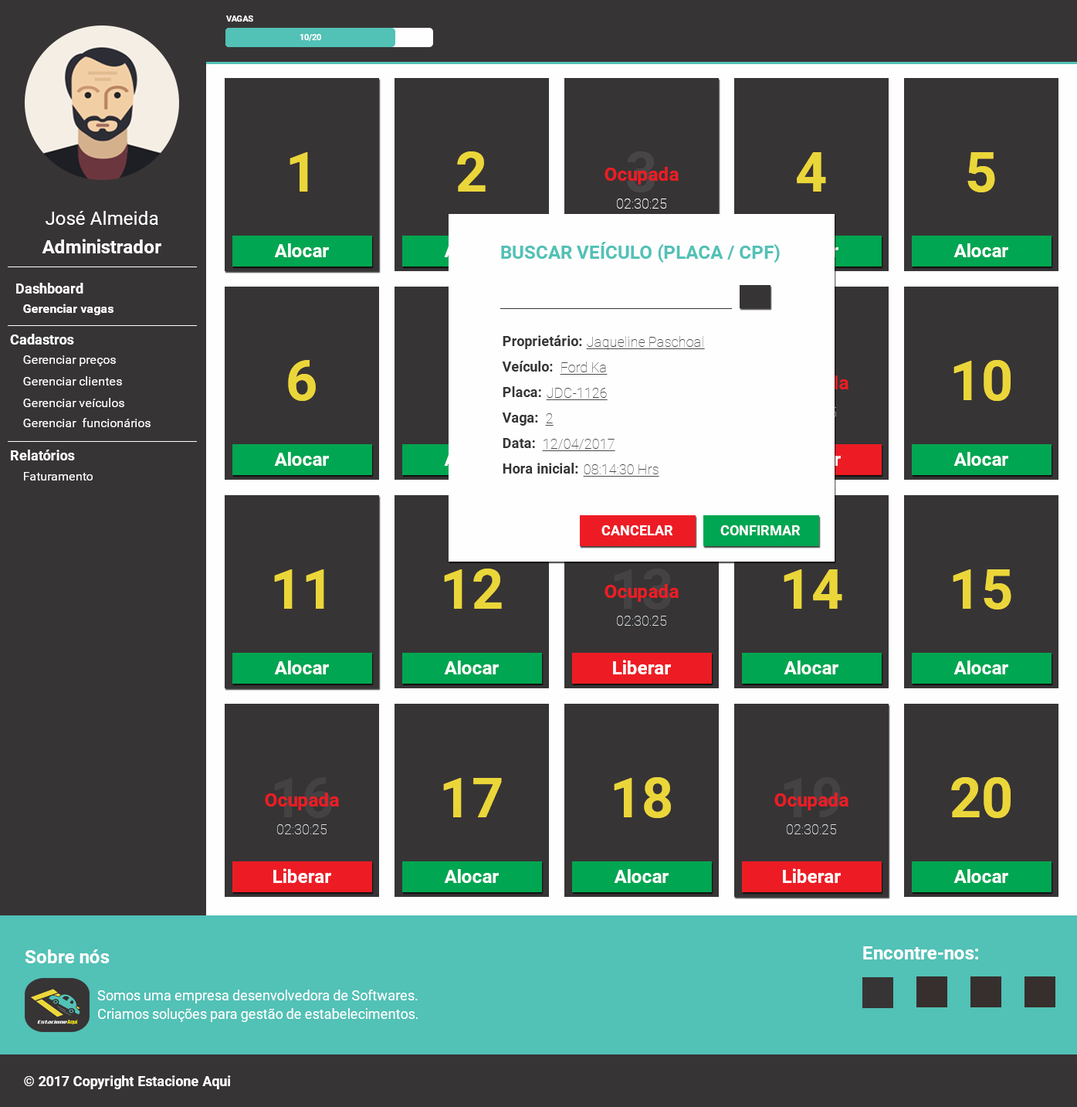
<style>
.page{position:relative;width:1077px;height:1107px;background:#373435}
.page>*{position:absolute;margin:0}
.t1{font:8.5px "Roboto-Bold";color:#fefefe;text-transform:uppercase}
.t2{font:8.5px "Roboto-Bold";color:#fefefe}
.t3{font:55.6px "Roboto-Bold";color:#ebd63a}
.t4{font:55.6px "Roboto-Bold";color:#484546}
.t5{font:18.5px "Roboto-Bold";color:#ed1c24}
.t6{font:13.9px "Roboto-Thin";color:#fefefe}
.t7{font:18.5px "Roboto-Regular";color:#fefefe}
.t8{font:18.5px "Roboto-Bold";color:#fefefe}
.t9{font:18.5px "Roboto-Bold";color:#52c1b6;text-transform:uppercase}
.t10{font:13.9px "Roboto-Bold";color:#fefefe}
.t11{font:12.4px "Roboto-Bold";color:#fefefe}
.t12{font:13.9px "Roboto-Bold";color:#373435}
.t13{font:13.9px "Roboto-Thin";color:#484b4d;text-decoration:underline}
.t14{font:12.4px "Roboto-Regular";color:#fefefe}
.t15{font:13.9px "Roboto-Bold";color:#fefefe;text-transform:uppercase}
.t16{font:55.6px "Roboto-Bold";color:#444243}
.t17{font:13.9px "Roboto-Thin";color:#d9e0e6}
.t18{font:13.9px/18.5px "Roboto-Regular";color:#fefefe}
</style>
<div class="page">
<p class="t1" style="left:226px;top:15px;width:27px;height:7px">Vagas</p>
<p class="t2" style="left:300px;top:34px;width:21px;height:7px">10/20</p>
<p class="t3" style="left:290px;top:152px;width:18px;height:40px">1</p>
<p class="t3" style="left:457px;top:151px;width:29px;height:41px">2</p>
<p class="t4" style="left:627px;top:151px;width:28px;height:41px">3</p>
<p class="t3" style="left:797px;top:152px;width:29px;height:40px">4</p>
<p class="t3" style="left:968px;top:152px;width:28px;height:40px">5</p>
<p class="t5" style="left:605px;top:167px;width:74px;height:18px">Ocupada</p>
<p class="t6" style="left:617px;top:198px;width:50px;height:11px">02:30:25</p>
<p class="t7" style="left:46px;top:211px;width:112px;height:14px">José Almeida</p>
<p class="t8" style="left:42px;top:239px;width:119px;height:14px">Administrador</p>
<p class="t8" style="left:274px;top:243px;width:55px;height:14px">Alocar</p>
<p class="t9" style="left:501px;top:242px;width:279px;height:21px">Buscar veículo (placa / cpf)</p>
<p class="t8" style="left:954px;top:243px;width:55px;height:14px">Alocar</p>
<p class="t10" style="left:16px;top:283px;width:67px;height:10px">Dashboard</p>
<p class="t11" style="left:23px;top:304px;width:91px;height:11px">Gerenciar vagas</p>
<p class="t10" style="left:10px;top:334px;width:64px;height:10px">Cadastros</p>
<p class="t12" style="left:503px;top:335px;width:79px;height:14px">Proprietário:</p>
<p class="t13" style="left:586px;top:336px;width:119px;height:14px">Jaqueline Paschoal</p>
<p class="t14" style="left:23px;top:355px;width:93px;height:11px">Gerenciar preços</p>
<p class="t3" style="left:288px;top:360px;width:28px;height:41px">6</p>
<p class="t12" style="left:502px;top:361px;width:51px;height:10px">Veículo:</p>
<p class="t13" style="left:560px;top:361px;width:48px;height:14px">Ford Ka</p>
<p class="t3" style="left:954px;top:360px;width:57px;height:41px">10</p>
<p class="t14" style="left:23px;top:376px;width:99px;height:9px">Gerenciar clientes</p>
<p class="t12" style="left:503px;top:386px;width:38px;height:11px">Placa:</p>
<p class="t13" style="left:546px;top:388px;width:62px;height:12px">JDC-1126</p>
<p class="t14" style="left:23px;top:398px;width:101px;height:9px">Gerenciar veículos</p>
<p class="t12" style="left:502px;top:412px;width:36px;height:14px">Vaga:</p>
<p class="t13" style="left:545px;top:413px;width:9px;height:13px">2</p>
<p class="t14" style="left:23px;top:418px;width:128px;height:9px">Gerenciar  funcionários</p>
<p class="t12" style="left:503px;top:438px;width:32px;height:10px">Data:</p>
<p class="t10" style="left:11px;top:450px;width:64px;height:10px">Relatórios</p>
<p class="t13" style="left:542px;top:439px;width:74px;height:12px">12/04/2017</p>
<p class="t8" style="left:274px;top:452px;width:55px;height:14px">Alocar</p>
<p class="t8" style="left:954px;top:452px;width:55px;height:14px">Alocar</p>
<p class="t14" style="left:24px;top:472px;width:69px;height:8px">Faturamento</p>
<p class="t12" style="left:503px;top:463px;width:75px;height:10px">Hora inicial:</p>
<p class="t13" style="left:583px;top:464px;width:77px;height:13px">08:14:30 Hrs</p>
<p class="t15" style="left:602px;top:525px;width:71px;height:10px">CancelaR</p>
<p class="t15" style="left:721px;top:525px;width:79px;height:10px">Confirmar</p>
<p class="t3" style="left:274px;top:569px;width:50px;height:40px">11</p>
<p class="t3" style="left:444px;top:568px;width:58px;height:41px">12</p>
<p class="t16" style="left:614px;top:568px;width:57px;height:41px">13</p>
<p class="t3" style="left:784px;top:569px;width:59px;height:40px">14</p>
<p class="t3" style="left:953px;top:569px;width:59px;height:40px">15</p>
<p class="t5" style="left:605px;top:584px;width:74px;height:18px">Ocupada</p>
<p class="t17" style="left:617px;top:616px;width:50px;height:10px">02:30:25</p>
<p class="t8" style="left:274px;top:660px;width:55px;height:14px">Alocar</p>
<p class="t8" style="left:444px;top:660px;width:55px;height:14px">Alocar</p>
<p class="t8" style="left:613px;top:660px;width:58px;height:14px">Liberar</p>
<p class="t8" style="left:784px;top:660px;width:55px;height:14px">Alocar</p>
<p class="t8" style="left:954px;top:660px;width:55px;height:14px">Alocar</p>
<p class="t16" style="left:274px;top:777px;width:58px;height:41px">16</p>
<p class="t3" style="left:443px;top:778px;width:59px;height:39px">17</p>
<p class="t3" style="left:614px;top:777px;width:57px;height:41px">18</p>
<p class="t16" style="left:784px;top:777px;width:57px;height:40px">19</p>
<p class="t3" style="left:952px;top:777px;width:59px;height:41px">20</p>
<p class="t5" style="left:265px;top:792px;width:74px;height:18px">Ocupada</p>
<p class="t5" style="left:775px;top:792px;width:74px;height:18px">Ocupada</p>
<p class="t17" style="left:277px;top:824px;width:50px;height:10px">02:30:25</p>
<p class="t17" style="left:787px;top:824px;width:49px;height:10px">02:30:25</p>
<p class="t8" style="left:273px;top:868px;width:58px;height:15px">Liberar</p>
<p class="t8" style="left:444px;top:869px;width:55px;height:14px">Alocar</p>
<p class="t8" style="left:614px;top:869px;width:55px;height:14px">Alocar</p>
<p class="t8" style="left:783px;top:868px;width:58px;height:15px">Liberar</p>
<p class="t8" style="left:954px;top:869px;width:55px;height:14px">Alocar</p>
<p class="t8" style="left:25px;top:949px;width:85px;height:14px">Sobre nós</p>
<p class="t8" style="left:863px;top:946px;width:116px;height:13px">Encontre-nos:</p>
<p class="t18" style="left:97px;top:989px;width:321px;height:33px">Somos uma empresa desenvolvedora de Softwares. Criamos soluções para gestão de estabelecimentos.</p>
<p class="t10" style="left:24px;top:1075px;width:207px;height:14px">© 2017 Copyright Estacione Aqui</p>
</div>
